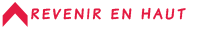
<style>
.page{position:relative;width:200px;height:30px;background:#ffffff}
.page>*{position:absolute;margin:0}
.t1{font:16px "KomikaText-Bold";letter-spacing:0.18em;color:#e41a41;text-transform:uppercase}
</style>
<div class="page">
<p class="t1" style="left:31px;top:7px;width:155px;height:13px">Revenir en haut</p>
</div>
